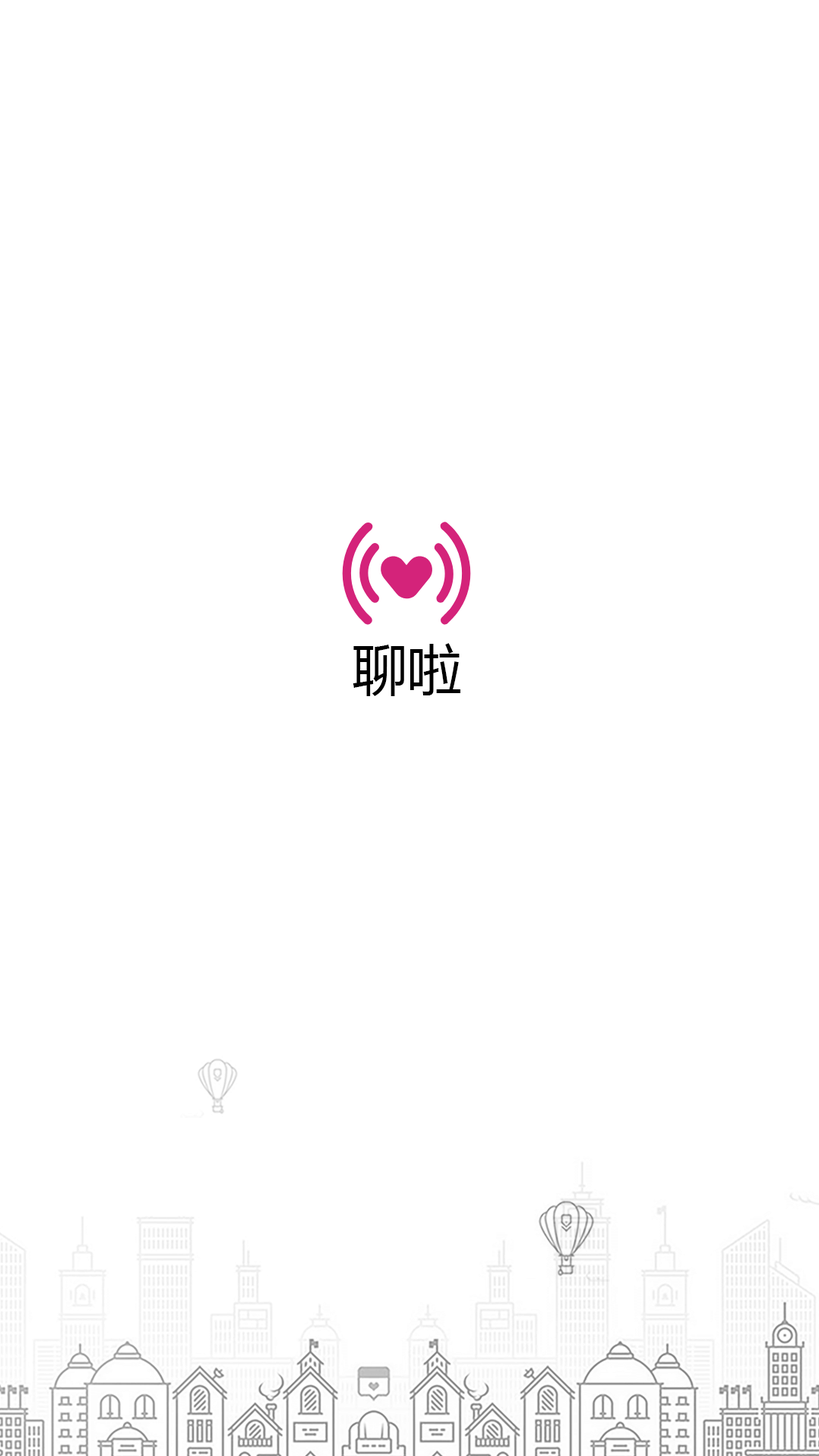
<style>
.page{position:relative;width:819px;height:1456px;background:#ffffff}
.page>*{position:absolute;margin:0}
.t1{font:54.6px "MicrosoftYaHei";color:#000000}
</style>
<div class="page">
<p class="t1" style="left:353px;top:643px;width:108px;height:53px">聊啦</p>
</div>
